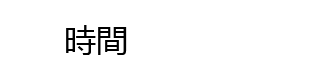
<style>
.page{position:relative;width:314px;height:82px;background:#ffffff}
.page>*{position:absolute;margin:0}
.t1{font:32px "MicrosoftYaHei";color:#000000}
</style>
<div class="page">
<p class="t1" style="left:66px;top:25px;width:61px;height:30px">時間</p>
</div>
